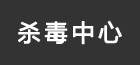
<style>
.page{position:relative;width:140px;height:65px;background:#333333}
.page>*{position:absolute;margin:0}
.t1{font:24px "FZLTHJW--GB1-0";letter-spacing:0.1em;color:#ffffff;font-weight:bold}
</style>
<div class="page">
<p class="t1" style="left:18px;top:20px;width:104px;height:25px">杀毒中心</p>
</div>
